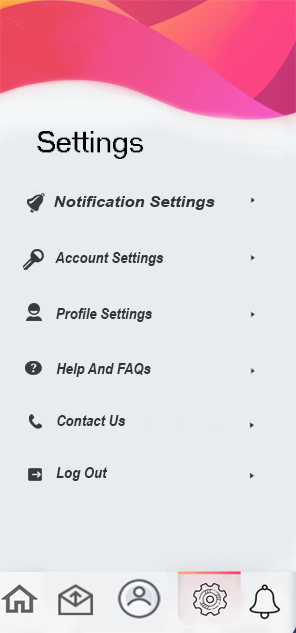
<style>
.page{position:relative;width:296px;height:633px;background:#e8ecef}
.page>*{position:absolute;margin:0}
.t1{font:30px "MS Sans Serif";color:#000000}
.t2{font:24px "MS Sans Serif";color:#000000}
.t3{font:16px "ArialNarrow-BoldItalic";color:#333333}
</style>
<div class="page">
<p class="t1" style="left:37px;top:131px;width:106px;height:28px"><span class="t2"> </span>Settings</p>
<p class="t3" style="left:55px;top:252px;width:109px;height:14px">Account Settings</p>
<p class="t3" style="left:56px;top:308px;width:96px;height:14px">Profile Settings</p>
<p class="t3" style="left:56px;top:363px;width:95px;height:14px">Help And FAQs</p>
<p class="t3" style="left:57px;top:415px;width:69px;height:11px">Contact Us</p>
<p class="t3" style="left:56px;top:467px;width:52px;height:14px">Log Out</p>
</div>
